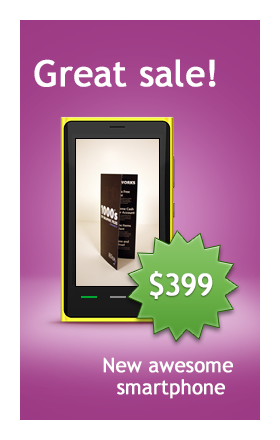
<style>
.page{position:relative;width:280px;height:440px;background:#ffffff}
.page>*{position:absolute;margin:0}
.t1{font:36px "TrebuchetMS";letter-spacing:-0.01em;color:#ffffff;font-weight:bold}
.t2{font:30px "TrebuchetMS";letter-spacing:-0.01em;color:#ffffff;font-weight:bold}
.t3{font:20px/22px "TrebuchetMS";letter-spacing:-0.01em;color:#ffffff;font-weight:bold}
</style>
<div class="page">
<p class="t1" style="left:34px;top:59px;width:182px;height:28px">Great sale!</p>
<p class="t2" style="left:150px;top:271px;width:63px;height:28px">$399</p>
<p class="t3" style="left:103px;top:357px;width:130px;height:42px;text-align:center">New awesome <br>smartphone</p>
</div>
